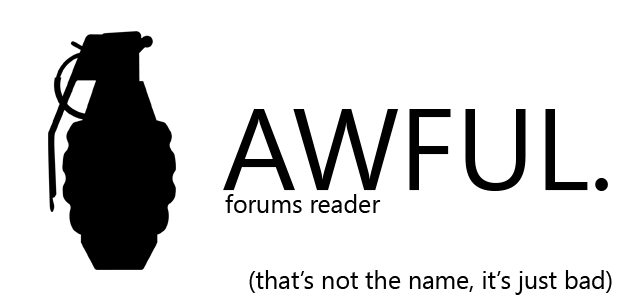
<style>
.page{position:relative;width:620px;height:300px;background:#ffffff}
.page>*{position:absolute;margin:0}
.t1{font:115px "SegoeUI";color:#000000}
.t2{font:25px "SegoeUI";color:#000000}
</style>
<div class="page">
<p class="t1" style="left:223px;top:109px;width:385px;height:82px">AWFUL.</p>
<p class="t2" style="left:225px;top:194px;width:156px;height:19px">forums reader</p>
<p class="t2" style="left:249px;top:270px;width:363px;height:25px">(that’s not the name, it’s just bad)</p>
</div>
